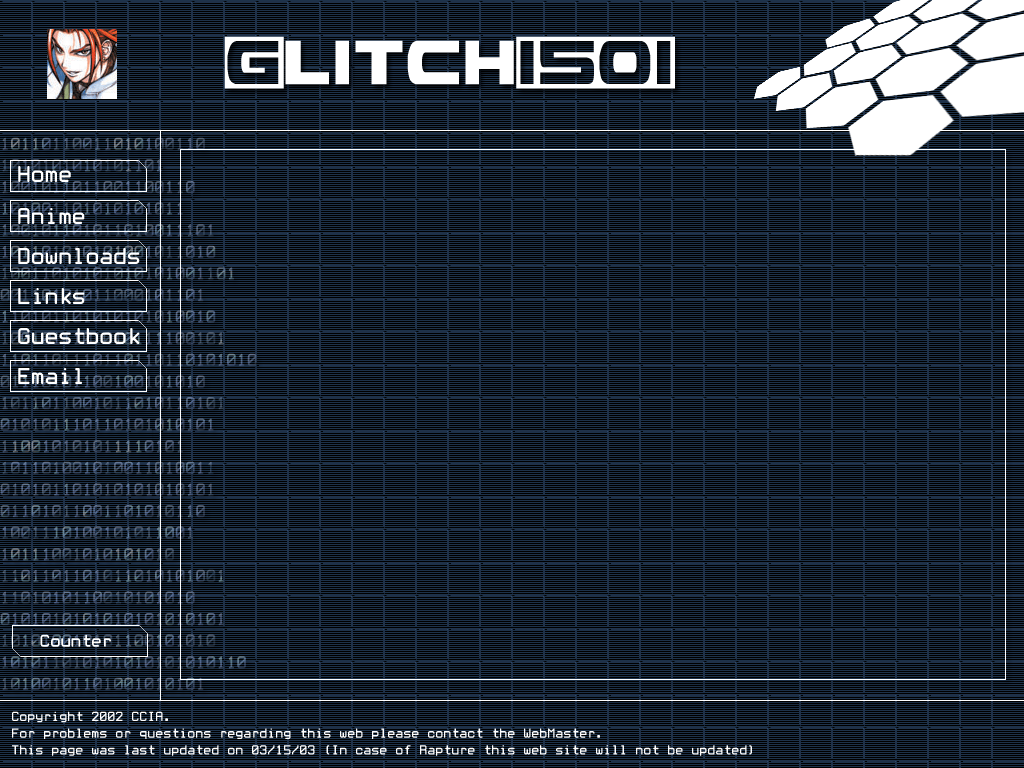
<style>
.page{position:relative;width:1024px;height:768px;background:#1d324a}
.page>*{position:absolute;margin:0}
.t1{font:24px "WhiteRabbit";color:#ffffff}
.t2{font:18px "WhiteRabbit";color:#ffffff}
.t3{font:14px "WhiteRabbit";color:#ffffff}
</style>
<div class="page">
<p class="t1" style="left:18px;top:166px;width:53px;height:16px">Home</p>
<p class="t1" style="left:18px;top:208px;width:67px;height:16px">Anime</p>
<p class="t1" style="left:18px;top:248px;width:122px;height:16px">Downloads</p>
<p class="t1" style="left:18px;top:288px;width:67px;height:16px">Links</p>
<p class="t1" style="left:18px;top:328px;width:122px;height:16px">Guestbook</p>
<p class="t1" style="left:18px;top:368px;width:64px;height:16px">Email</p>
<p class="t2" style="left:40px;top:634px;width:71px;height:13px">Counter</p>
<p class="t3" style="left:12px;top:711px;width:740px;height:45px">Copyright 2002 CCIA.<br>For problems or questions regarding this web please contact the WebMaster.<br>This page was last updated on 03/15/03 (In case of Rapture this web site will not be updated)</p>
</div>
